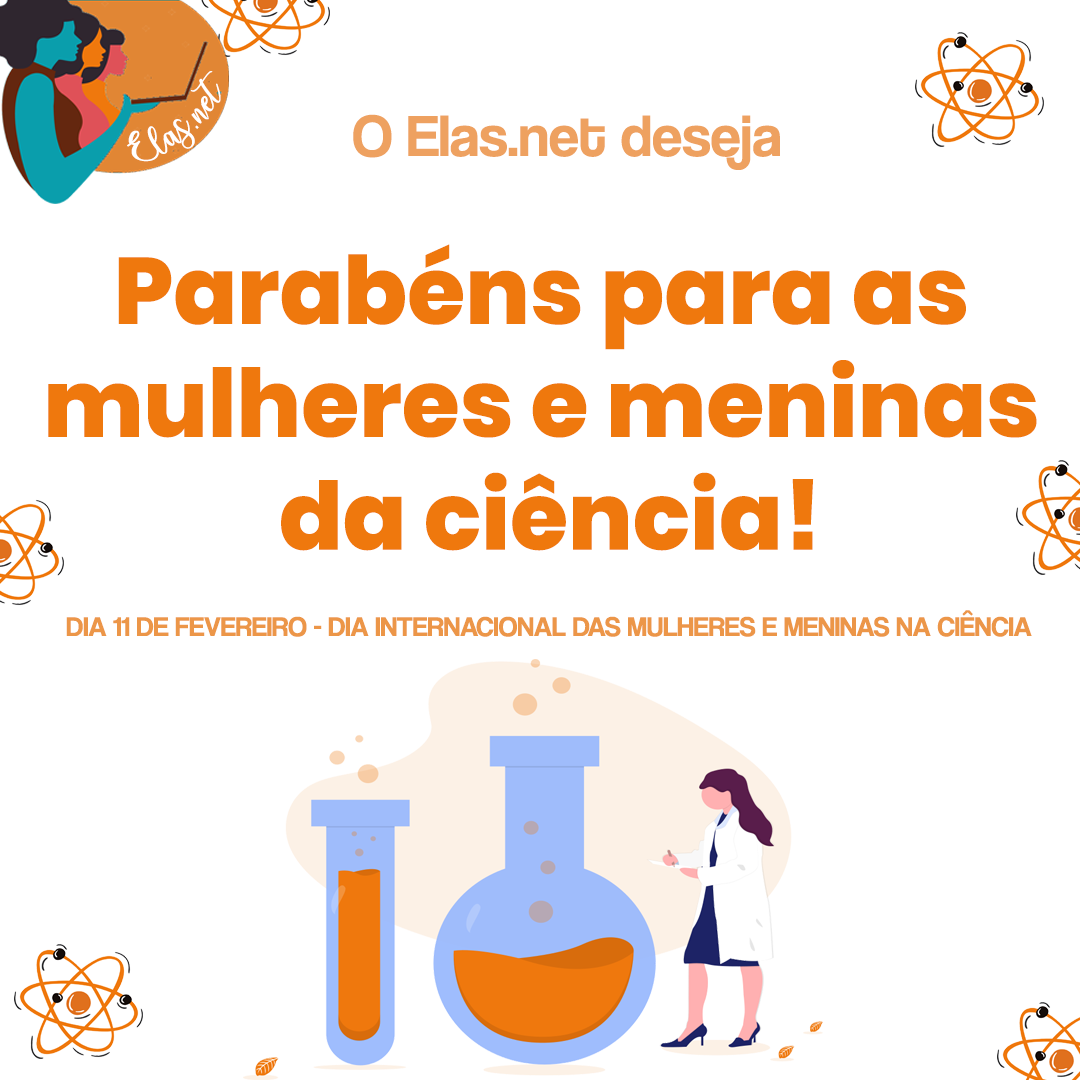
<style>
.page{position:relative;width:1080px;height:1080px;background:#ffffff}
.page>*{position:absolute;margin:0}
.t1{font:26.4px "charlinda-Regular";color:#ffffff;scale:1.18 1}
.t2{font:60px "CoolveticaRg-Regular";color:#ec9648}
.t3{font:94px "Poppins-ExtraBold";color:#ef780d}
.t4{font:28px "CoolveticaRg-Regular";color:#ec9648;text-transform:uppercase}
</style>
<div class="page">
<p class="t1" style="left:127px;top:71px;width:94px;height:91px;rotate:-41deg">Elas.net</p>
<p class="t2" style="left:353px;top:114px;width:427px;height:56px;opacity:0.91">O Elas.net deseja</p>
<p class="t3" style="left:48px;top:244px;width:989px;height:307px;text-align:center">Parabéns para as <br>mulheres e meninas <br>da ciência!</p>
<p class="t4" style="left:66px;top:610px;width:966px;height:27px">dia 11 de fevereiro - Dia internacional das mulheres e meninas na ciência</p>
</div>
